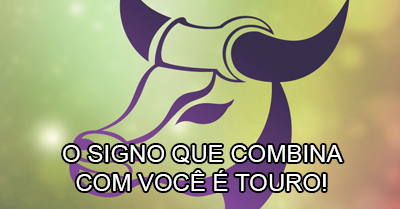
<style>
.page{position:relative;width:400px;height:209px}
.page>*{position:absolute;margin:0}
.t1{font:24px "ArialMT";color:#ffffff}
</style>
<div class="page">
<p class="t1" style="left:63px;top:145px;width:280px;height:46px;text-align:center">O SIGNO QUE COMBINA<br>COM VOCÊ É TOURO!</p>
</div>
